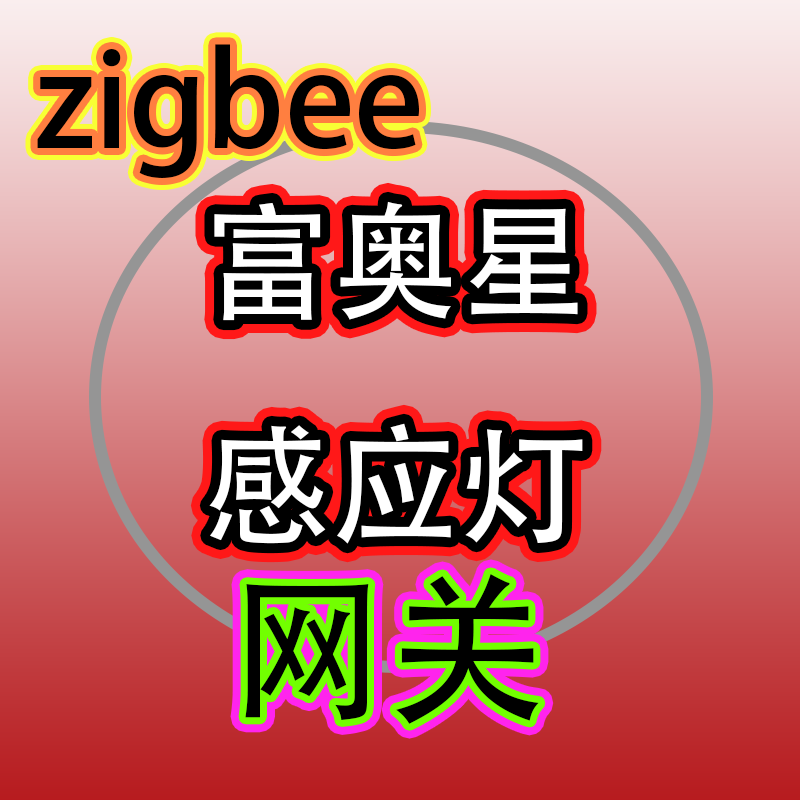
<style>
.page{position:relative;width:800px;height:800px}
.page>*{position:absolute;margin:0}
.t1{font:128px "AdobeHeitiStd-Regular";color:#000000}
.t2{font:128px "AdobeHeitiStd-Regular";color:#ffffff}
.t3{font:160px "AdobeHeitiStd-Regular";color:#000000}
</style>
<div class="page">
<p class="t1" style="left:37px;top:44px;width:382px;height:134px">zigbee</p>
<p class="t2" style="left:209px;top:201px;width:374px;height:343px">富奥星<br>感应灯</p>
<p class="t3" style="left:245px;top:574px;width:294px;height:150px">网关</p>
</div>
